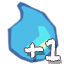
<style>
.page{position:relative;width:64px;height:64px;background:#ffffff}
.page>*{position:absolute;margin:0}
.t1{font:30px "Chalkduster";color:#ffffff;font-variant:small-caps;font-weight:bold}
</style>
<div class="page">
<p class="t1" style="left:24px;top:38px;width:36px;height:23px">+1</p>
</div>
